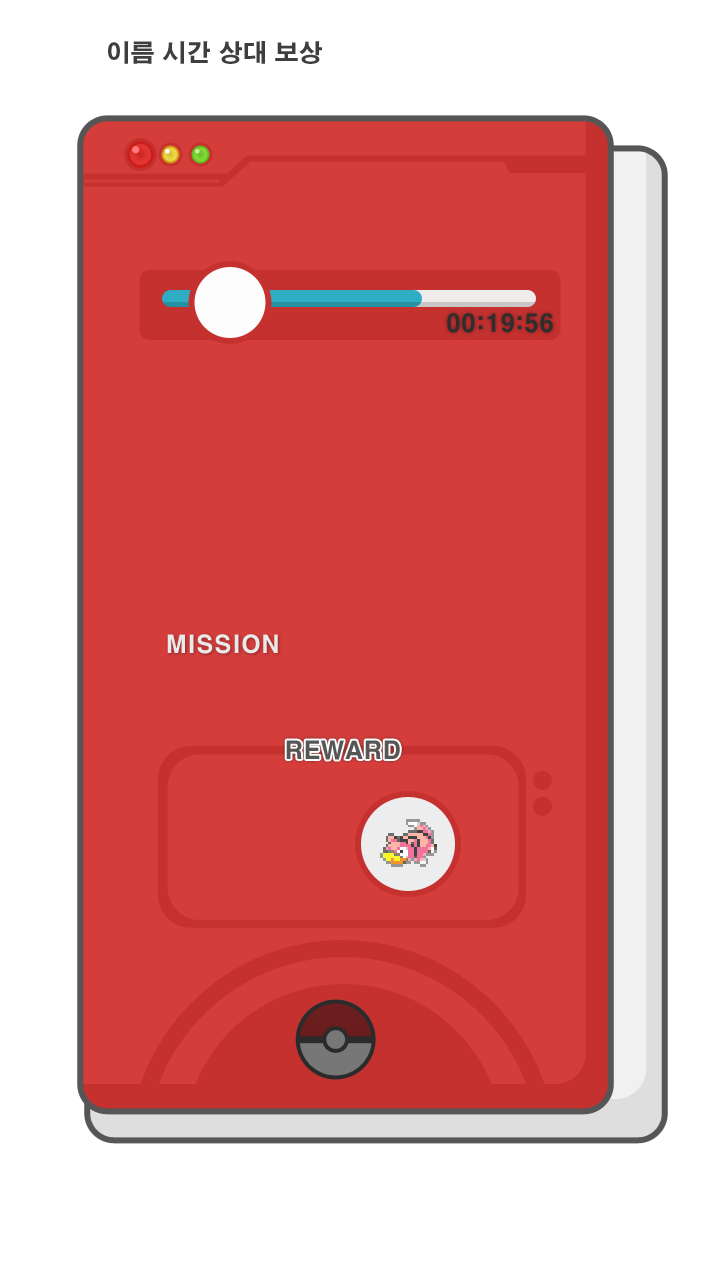
<style>
.page{position:relative;width:720px;height:1280px;background:#d53d3b}
.page>*{position:absolute;margin:0}
.t1{font:24px "H2gtrE";color:#3e3e3e}
.t2{font:24px "H2gtrE";color:#2e2e2e}
.t3{font:24px "H2gtrE";color:#e9e9e9}
.t4{font:24px "H2gtrE";color:#565656}
</style>
<div class="page">
<p class="t1" style="left:108px;top:41px;width:214px;height:23px">이름 시간 상대 보상</p>
<p class="t2" style="left:447px;top:313px;width:106px;height:20px">00:19:56</p>
<p class="t3" style="left:167px;top:634px;width:111px;height:20px">MISSION</p>
<p class="t4" style="left:286px;top:740px;width:114px;height:20px">REWARD</p>
</div>
